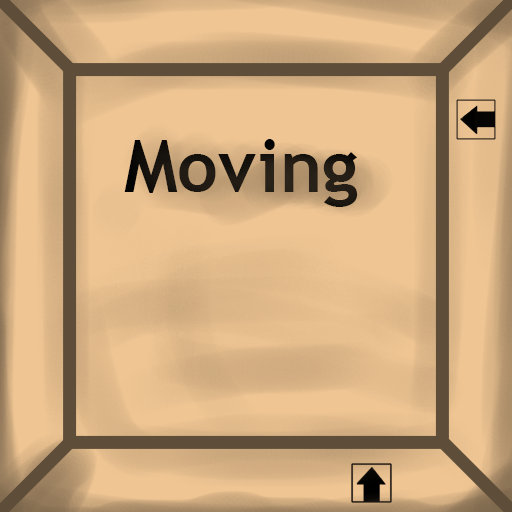
<style>
.page{position:relative;width:512px;height:512px}
.page>*{position:absolute;margin:0}
.t1{font:72px "TrebuchetMS-Bold";color:#1c1811}
</style>
<div class="page">
<p class="t1" style="left:124px;top:139px;width:234px;height:68px">Moving</p>
</div>
